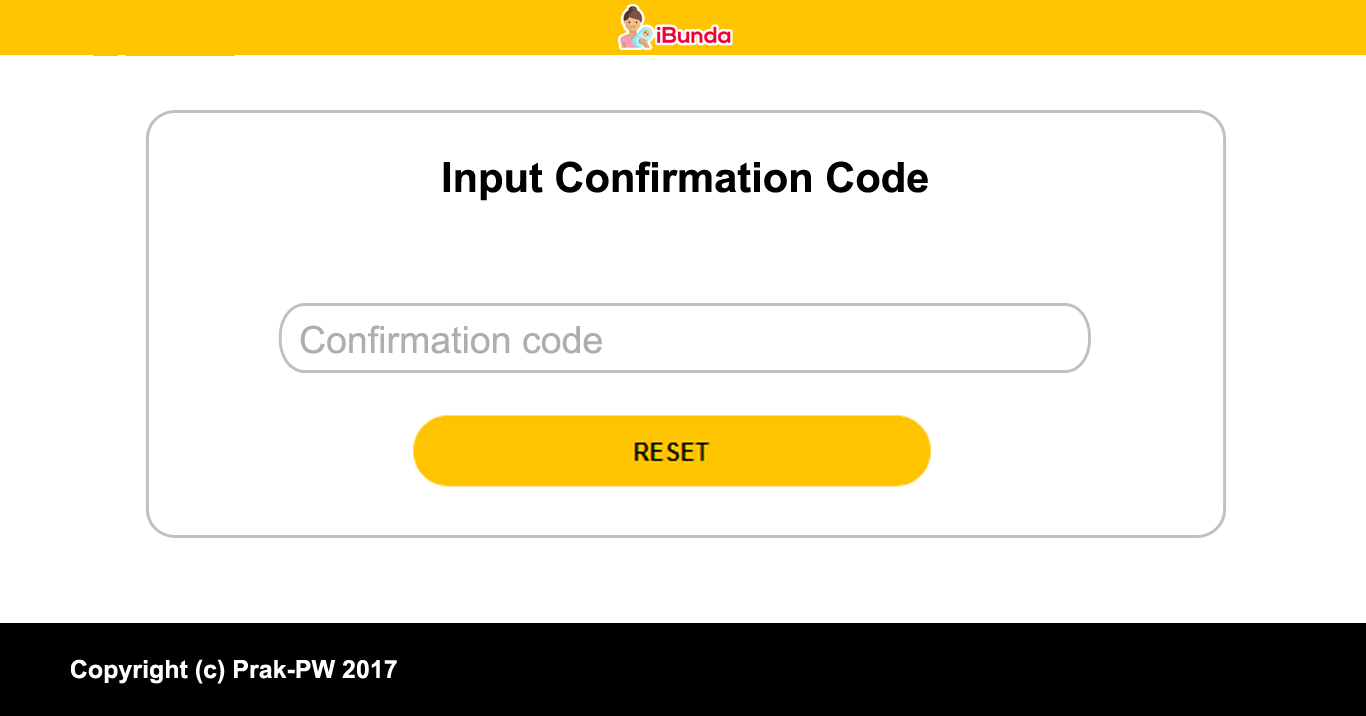
<style>
.page{position:relative;width:1366px;height:716px;background:#ffffff}
.page>*{position:absolute;margin:0}
.t1{font:41.7px "Arial-BoldMT";color:#000000}
.t2{font:37.5px "ArialMT";color:#b1adad}
.t3{font:25px "Arial-BoldMT";color:#ffffff}
</style>
<div class="page">
<p class="t1" style="left:443px;top:161px;width:485px;height:40px">Input Confirmation Code</p>
<p class="t2" style="left:300px;top:325px;width:302px;height:29px">Confirmation code</p>
<p class="t3" style="left:70px;top:659px;width:327px;height:25px">Copyright (c) Prak-PW 2017</p>
</div>
